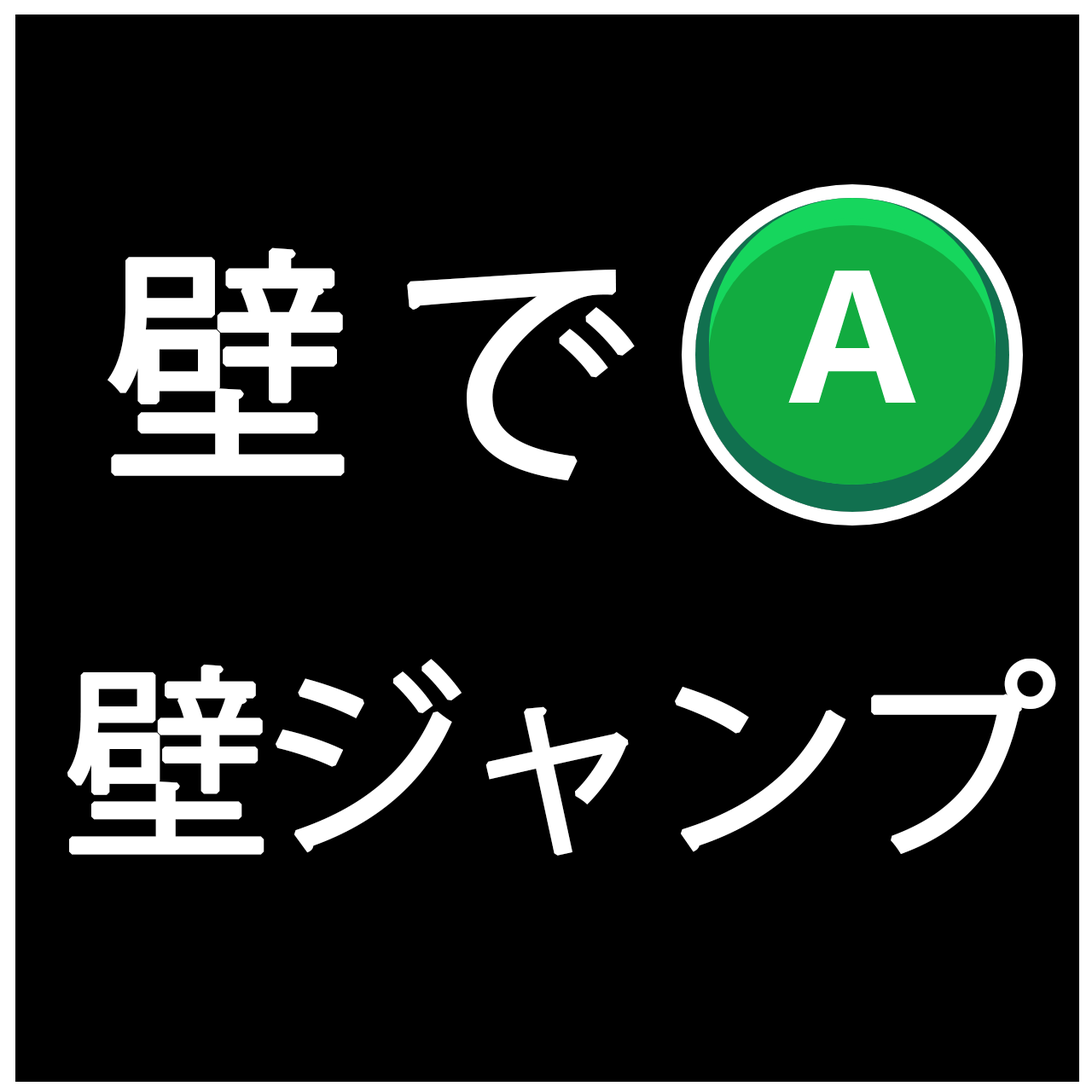
<style>
.page{position:relative;width:1092px;height:1092px;background:#000000}
.page>*{position:absolute;margin:0}
.t1{font:245.7px "KozGoPr6N-Regular";letter-spacing:-0.07em;color:#ffffff;font-weight:bold}
.t2{font:204.7px "KozGoPr6N-Regular";letter-spacing:-0.07em;color:#ffffff;font-weight:bold}
</style>
<div class="page">
<p class="t1" style="left:107px;top:247px;width:528px;height:234px">壁 で</p>
<p class="t2" style="left:67px;top:659px;width:989px;height:197px">壁ジャンプ</p>
</div>
